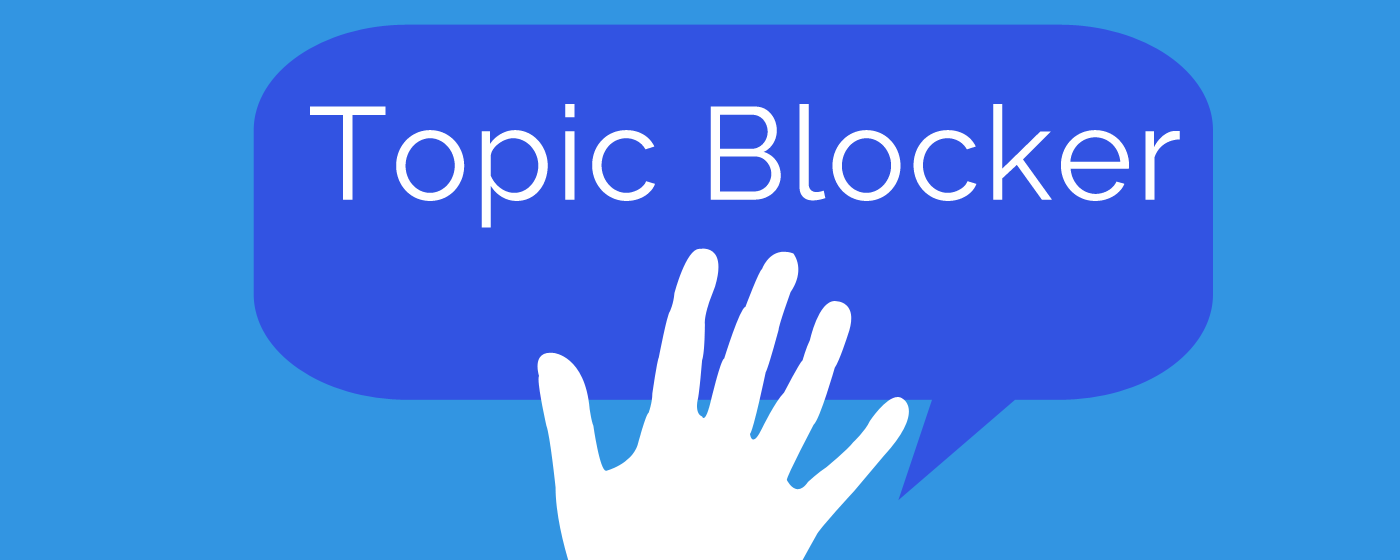
<style>
.page{position:relative;width:1400px;height:560px;background:#3295e2}
.page>*{position:absolute;margin:0}
.t1{font:130.7px "Raleway-Regular";letter-spacing:0.025em;color:#ffffff}
</style>
<div class="page">
<p class="t1" style="left:310px;top:104px;width:870px;height:124px">Topic Blocker</p>
</div>
